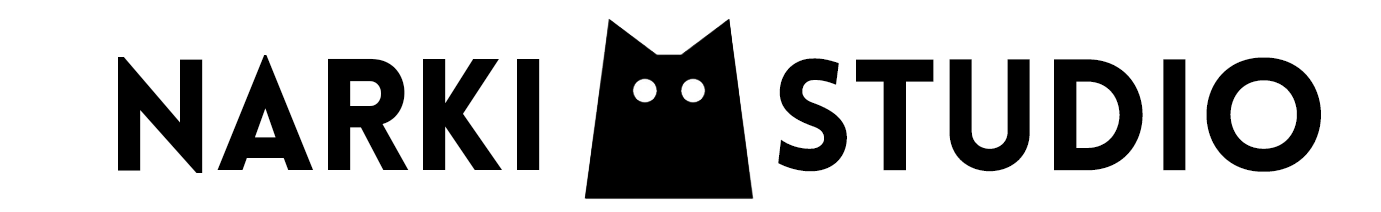
<style>
.page{position:relative;width:1381px;height:212px;background:#ffffff}
.page>*{position:absolute;margin:0}
.t1{font:155px "Lovelo-Black";color:#000000}
</style>
<div class="page">
<p class="t1" style="left:118px;top:55px;width:422px;height:118px">NARKI</p>
<p class="t1" style="left:778px;top:57px;width:543px;height:115px">STUDIO</p>
</div>
